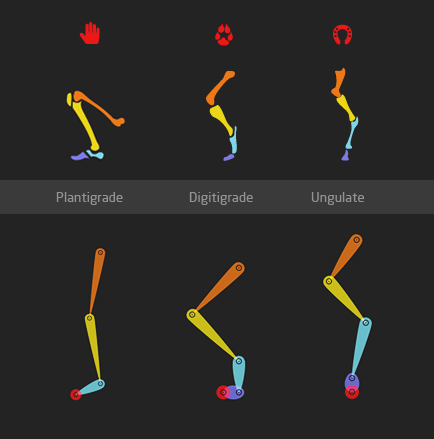
<style>
.page{position:relative;width:434px;height:439px;background:#232323}
.page>*{position:absolute;margin:0}
.t1{font:13.3px "NeoSans";color:#939393}
</style>
<div class="page">
<p class="t1" style="left:56px;top:192px;width:67px;height:13px">Plantigrade</p>
<p class="t1" style="left:189px;top:192px;width:64px;height:13px">Digitigrade</p>
<p class="t1" style="left:311px;top:192px;width:53px;height:13px">Ungulate</p>
</div>
